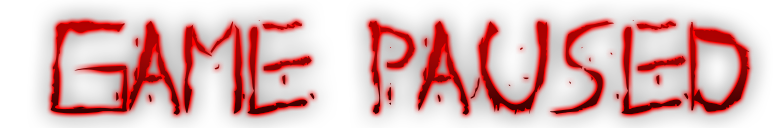
<style>
.page{position:relative;width:784px;height:128px}
.page>*{position:absolute;margin:0}
.t1{font:133.2px "AboutDead"}
</style>
<div class="page">
<p class="t1" style="left:50px;top:20px;width:700px;height:95px">Game Paused</p>
</div>
